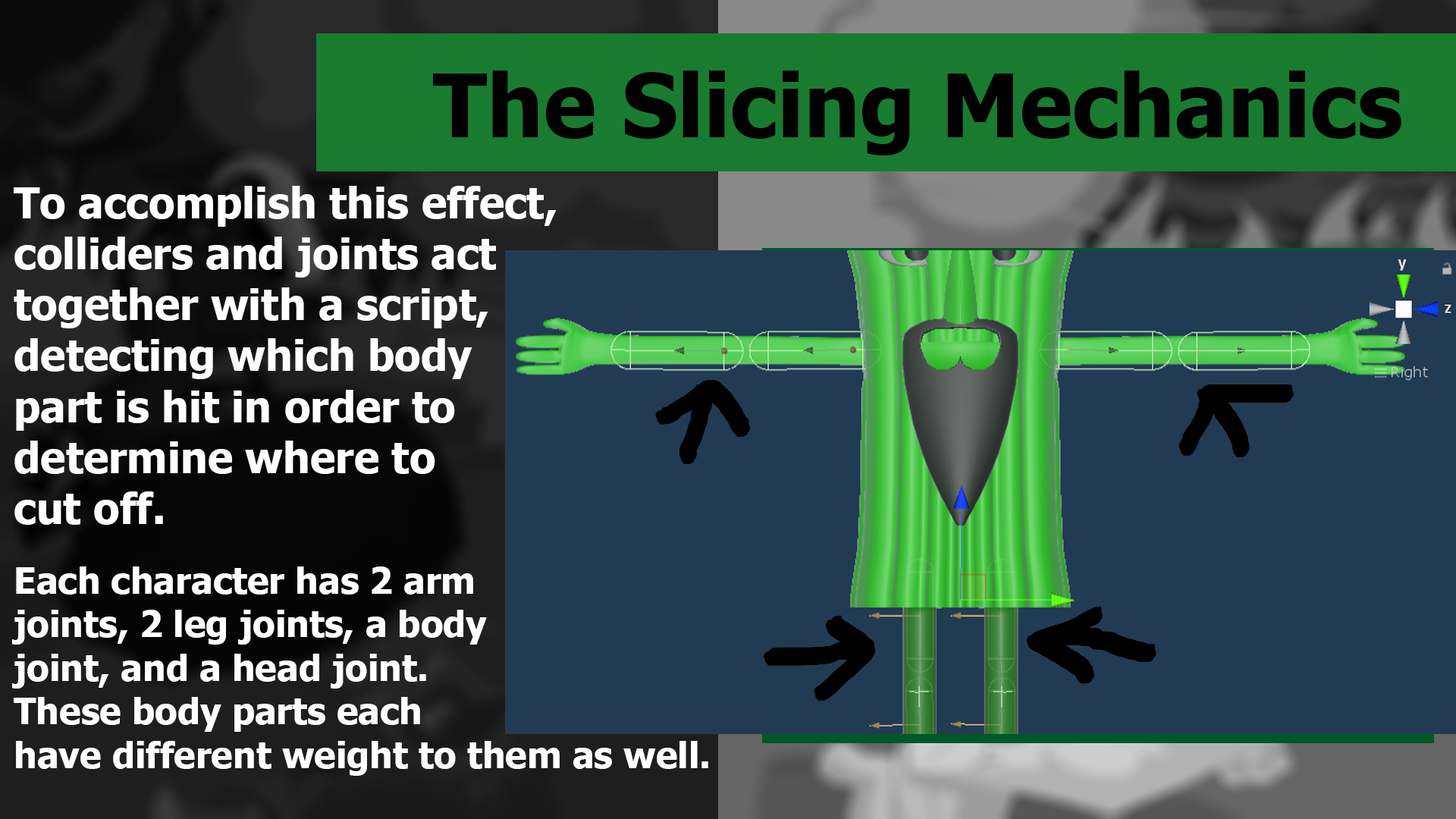
<style>
.page{position:relative;width:1456px;height:819px;background:#223b54}
.page>*{position:absolute;margin:0}
.t1{font:88.1px "Tahoma-Bold";color:#000000}
.t2{font:42.5px "Tahoma-Bold";color:#ffffff}
.t3{font:36.4px "Tahoma-Bold";color:#ffffff}
</style>
<div class="page">
<p class="t1" style="left:433px;top:71px;width:968px;height:84px">The Slicing Mechanics</p>
<p class="t2" style="left:14px;top:186px;width:543px;height:339px">To accomplish this effect,<br>colliders and joints act<br>together with a script,<br>detecting which body<br>part is hit in order to<br>determine where to<br>cut off.</p>
<p class="t3" style="left:12px;top:566px;width:696px;height:210px">Each character has 2 arm<br>joints, 2 leg joints, a body<br>joint, and a head joint.<br>These body parts each<br>have different weight to them as well.</p>
</div>
